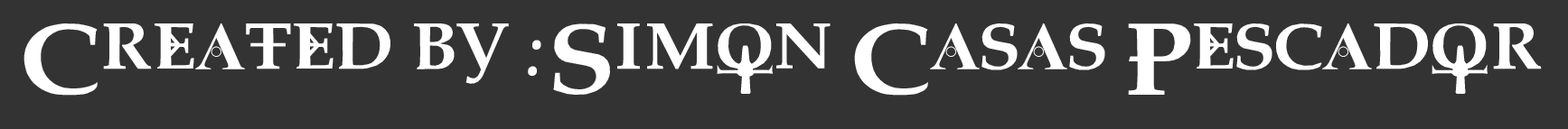
<style>
.page{position:relative;width:1568px;height:129px;background:#333333}
.page>*{position:absolute;margin:0}
.t1{font:67.8px "Dreaming-of-Lilian";color:#ffffff}
.t2{font:90.4px "AdobeDevanagari-Italic";color:#ffffff}
</style>
<div class="page">
<p class="t1" style="left:23px;top:23px;width:1519px;height:73px">Created by   Simon Casas Pescador</p>
<p class="t2" style="left:528px;top:40px;width:13px;height:37px">:</p>
</div>
